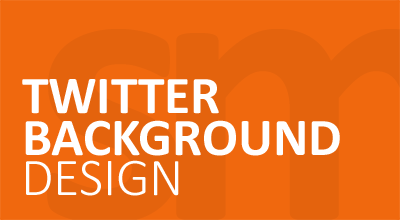
<style>
.page{position:relative;width:400px;height:220px;background:#f0680e}
.page>*{position:absolute;margin:0}
.t1{font:53.3px/41.6px "Calibri-Bold";color:#ffffff}
.t2{font:53.3px "Calibri-Light";color:#ffffff}
</style>
<div class="page">
<p class="t1" style="left:22px;top:79px;width:318px;height:77px">TWITTER<br>BACKGROUND</p>
<p class="t2" style="left:26px;top:160px;width:153px;height:36px">DESIGN</p>
</div>
